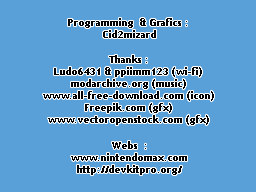
<style>
.page{position:relative;width:256px;height:192px;background:#59a0d8}
.page>*{position:absolute;margin:0}
.t1{font:10px "TrebuchetMS-Bold";color:#000000}
</style>
<div class="page">
<p class="t1" style="left:68px;top:18px;width:119px;height:20px;text-align:center">Programming  &amp; Grafics : <br>Cid2mizard</p>
<p class="t1" style="left:43px;top:55px;width:171px;height:70px;text-align:center">Thanks :<br>Ludo6431 &amp; ppiimm123 (wi-fi)<br>modarchive.org (music)<br>www.all-free-download.com (icon)<br>Freepik.com (gfx)<br>www.vectoropenstock.com (gfx)</p>
<p class="t1" style="left:71px;top:141px;width:116px;height:34px;text-align:center">Webs  :<br>www.nintendomax.com<br>http://devkitpro.org/</p>
</div>
